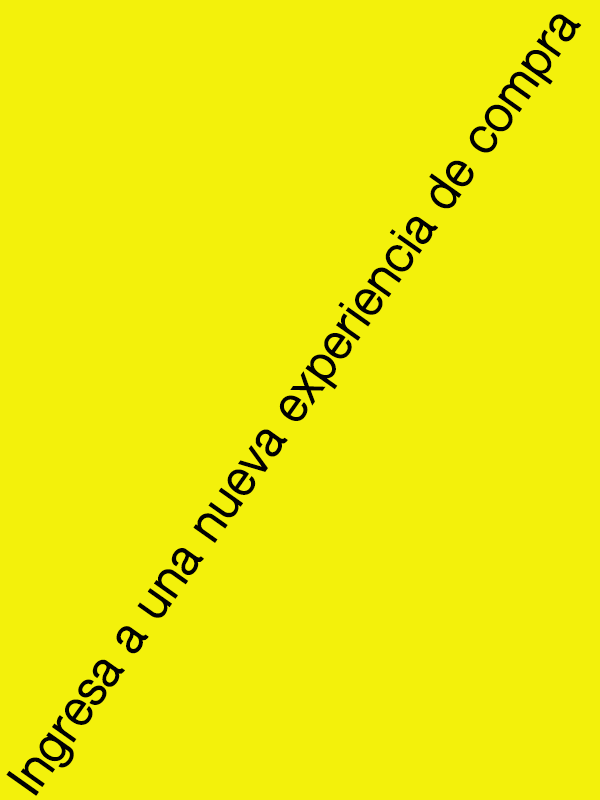
<style>
.page{position:relative;width:600px;height:800px;background:#f3f10b}
.page>*{position:absolute;margin:0}
.t1{font:48px "ShreeDev0714-Bold";color:#000001}
</style>
<div class="page">
<p class="t1" style="left:6px;top:14px;width:576px;height:782px;rotate:-55deg">Ingresa a una nueva experiencia de compra</p>
</div>
